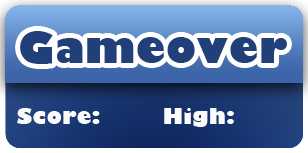
<style>
.page{position:relative;width:308px;height:153px}
.page>*{position:absolute;margin:0}
.t1{font:41.7px "GillSans-UltraBold";letter-spacing:0.025em;color:#213f79}
.t2{font:20.8px "GillSans-UltraBold";letter-spacing:0.025em;color:#fbfbfb}
</style>
<div class="page">
<p class="t1" style="left:20px;top:31px;width:267px;height:33px">Gameover</p>
<p class="t2" style="left:17px;top:108px;width:217px;height:19px">Score:       High:</p>
</div>
